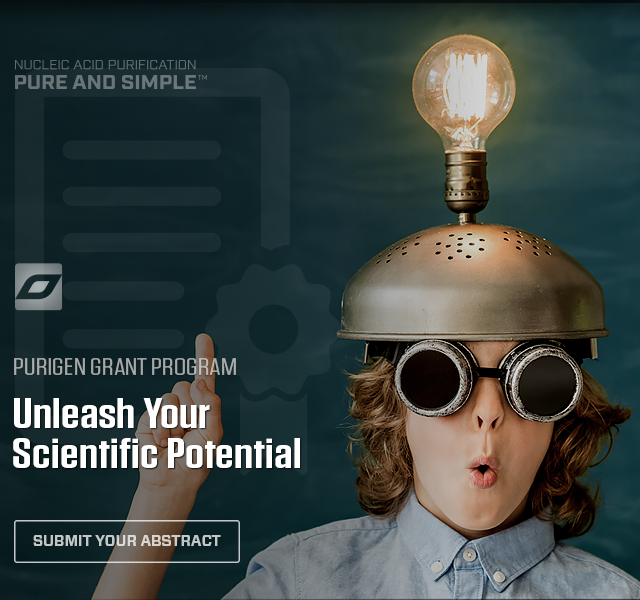
<style>
.page{position:relative;width:640px;height:600px}
.page>*{position:absolute;margin:0}
.t1{font:24px "Tungsten-Book";color:#a6a9aa;text-transform:uppercase;scale:1.37 1}
.t2{font:42px/40px "Tungsten-Semibold";letter-spacing:0.002em;color:#ffffff;scale:1.31 1}
.t3{font:15px "Forza-Bold";letter-spacing:-0.01em;color:#c2c7c8;text-transform:uppercase}
</style>
<div class="page">
<p class="t1" style="left:14px;top:358px;width:222px;height:17px">Purigen Grant Program</p>
<p class="t2" style="left:13px;top:398px;width:287px;height:70px">Unleash Your<br>Scientific Potential</p>
<p class="t3" style="left:33px;top:535px;width:188px;height:11px">Submit Your Abstract</p>
</div>
